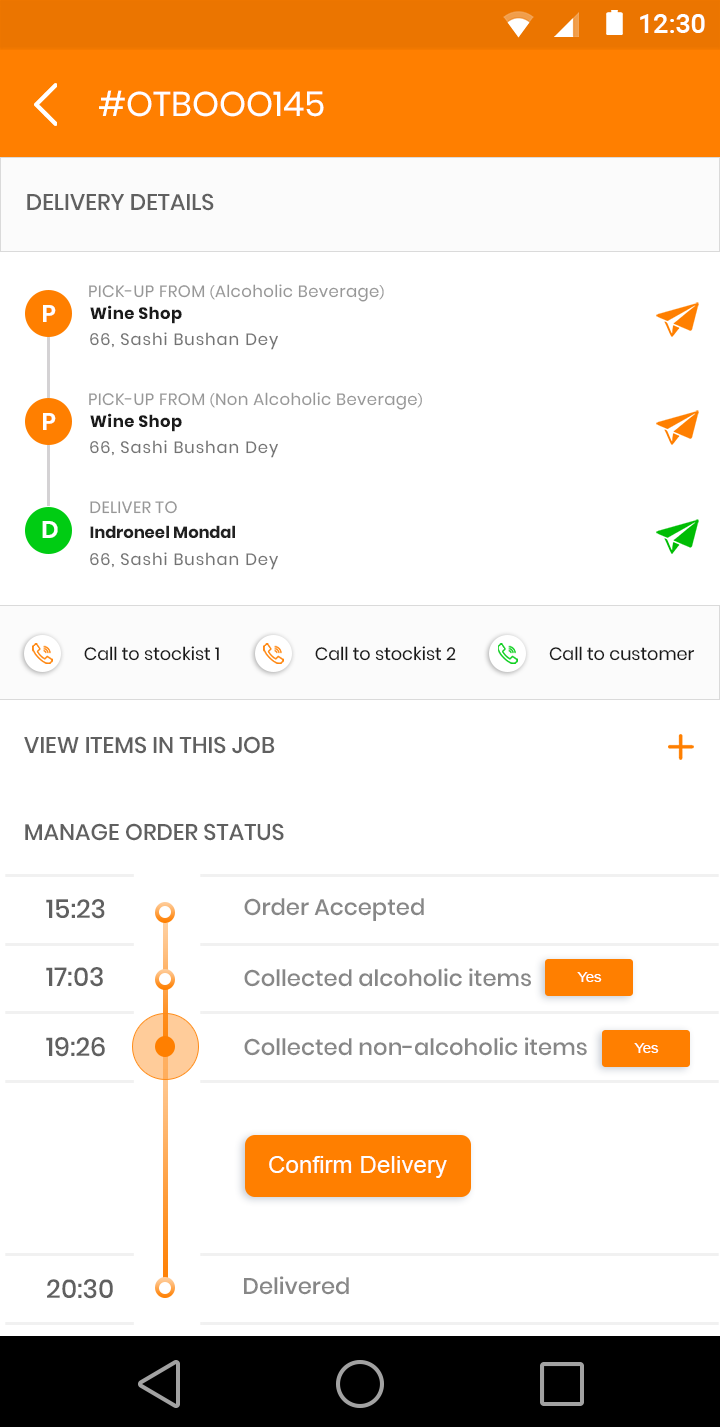
<style>
.page{position:relative;width:720px;height:1427px;background:#ffffff}
.page>*{position:absolute;margin:0}
.t1{font:27.5px "Roboto-Medium";color:#ffffff}
.t2{font:34.3px "Poppins-Regular";color:#ffffff}
.t3{font:22.7px "Poppins-Medium";color:#606060;text-transform:uppercase}
.t4{font:16.4px "Poppins-Regular";letter-spacing:0.025em;color:#979797}
.t5{font:16.4px "Poppins-Regular";letter-spacing:0.025em;color:#979797;text-transform:uppercase}
.t6{font:12px "Poppins-Regular";letter-spacing:0.025em;color:#979797;text-transform:uppercase}
.t7{font:24px "Poppins-SemiBold";color:#ffffff;text-transform:uppercase}
.t8{font:16.4px "Poppins-Bold";letter-spacing:0.025em;color:#1b1b1b}
.t9{font:16.4px "Poppins-Regular";letter-spacing:0.06em;color:#737373}
.t10{font:16.4px "Poppins-Bold";color:#212121}
.t11{font:16.4px "Poppins-Bold";color:#212121;text-transform:uppercase}
.t12{font:17.8px "Poppins-Regular";color:#191919}
.t13{font:26px "Poppins-Medium";color:#606060;text-transform:uppercase}
.t14{font:22.7px "Poppins-Medium";color:#878787}
.t15{font:14.4px "ArialMT";color:#fefefe}
.t16{font:24.3px "ArialMT";color:#fefefe}
</style>
<div class="page">
<p class="t1" style="left:640px;top:14px;width:65px;height:19px">12:30</p>
<p class="t2" style="left:99px;top:90px;width:225px;height:27px">#OTBOOO145</p>
<p class="t3" style="left:27px;top:193px;width:187px;height:18px">Delivery Details</p>
<p class="t4" style="left:89px;top:284px;width:295px;height:18px"><span class="t5">Pick-up From </span><span class="t6">(</span>Alcoholic Beverage<span class="t6">)</span></p>
<p class="t7" style="left:43px;top:305px;width:13px;height:17px">p</p>
<p class="t8" style="left:90px;top:305px;width:92px;height:19px">Wine Shop</p>
<p class="t9" style="left:90px;top:332px;width:188px;height:18px">66, Sashi Bushan Dey</p>
<p class="t4" style="left:89px;top:392px;width:333px;height:18px"><span class="t5">Pick-up From </span><span class="t6">(</span>Non Alcoholic Beverage<span class="t6">)</span></p>
<p class="t7" style="left:43px;top:413px;width:13px;height:17px">p</p>
<p class="t8" style="left:90px;top:413px;width:92px;height:19px">Wine Shop</p>
<p class="t9" style="left:90px;top:440px;width:188px;height:18px">66, Sashi Bushan Dey</p>
<p class="t5" style="left:90px;top:501px;width:87px;height:13px">deliver to</p>
<p class="t7" style="left:42px;top:521px;width:16px;height:17px">D</p>
<p class="t10" style="left:90px;top:525px;width:145px;height:13px"><span class="t11">I</span>ndroneel Mondal</p>
<p class="t9" style="left:90px;top:552px;width:188px;height:18px">66, Sashi Bushan Dey</p>
<p class="t12" style="left:84px;top:646px;width:135px;height:15px">Call to stockist 1</p>
<p class="t12" style="left:315px;top:646px;width:141px;height:15px">Call to stockist 2</p>
<p class="t12" style="left:549px;top:646px;width:146px;height:15px">Call to customer</p>
<p class="t3" style="left:24px;top:736px;width:251px;height:18px">View items in this job</p>
<p class="t3" style="left:25px;top:823px;width:259px;height:18px">Manage order status</p>
<p class="t13" style="left:46px;top:899px;width:59px;height:20px">15:23</p>
<p class="t14" style="left:244px;top:898px;width:180px;height:23px">Order Accepted</p>
<p class="t13" style="left:46px;top:967px;width:57px;height:20px">17:03</p>
<p class="t14" style="left:244px;top:968px;width:287px;height:19px">Collected alcoholic items</p>
<p class="t15" style="left:577px;top:972px;width:25px;height:10px">Yes</p>
<p class="t13" style="left:46px;top:1037px;width:59px;height:20px">19:26</p>
<p class="t14" style="left:244px;top:1037px;width:343px;height:19px">Collected non-alcoholic items</p>
<p class="t15" style="left:634px;top:1043px;width:25px;height:10px">Yes</p>
<p class="t16" style="left:269px;top:1156px;width:178px;height:22px">Confirm Delivery</p>
<p class="t14" style="left:244px;top:1276px;width:105px;height:19px">Delivered</p>
<p class="t13" style="left:47px;top:1279px;width:66px;height:20px">20:30</p>
</div>
